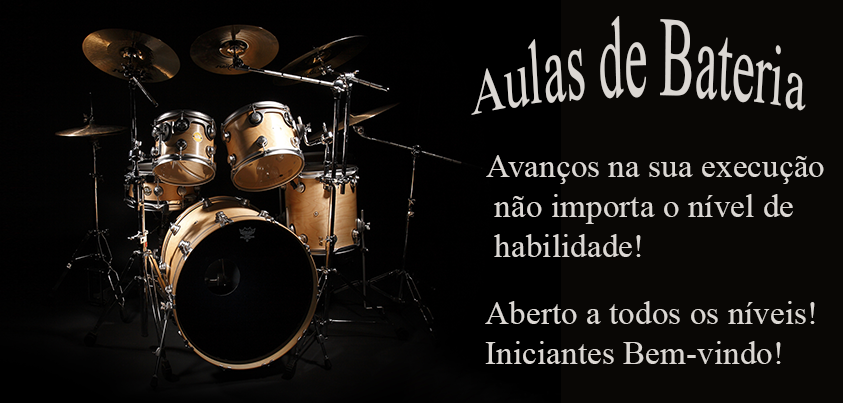
<style>
.page{position:relative;width:843px;height:403px;background:#090705}
.page>*{position:absolute;margin:0}
.t1{font:12px "TimesNewRomanPSMT";color:#dbd7d3}
.t2{font:33.3px "TimesNewRomanPSMT";color:#dbd7d3}
</style>
<div class="page">
<p class="t1" style="left:471px;top:16px;width:335px;height:99px">Aulas de Bateria</p>
<p class="t2" style="left:486px;top:155px;width:338px;height:102px">Avanços na sua execução<br> não importa o nível de<br> habilidade!</p>
<p class="t2" style="left:485px;top:301px;width:330px;height:63px">Aberto a todos os níveis! <br>Iniciantes Bem-vindo!</p>
</div>
